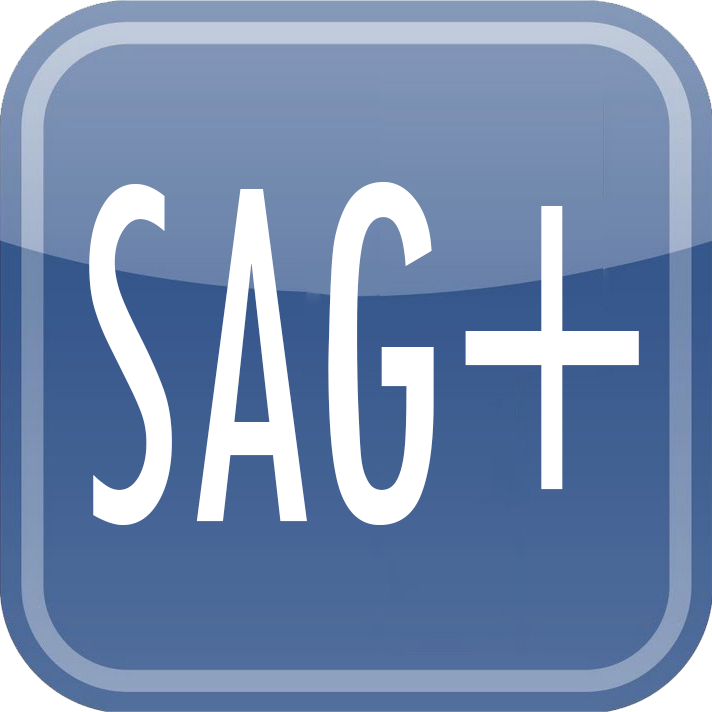
<style>
.page{position:relative;width:712px;height:712px}
.page>*{position:absolute;margin:0}
.t1{font:534.1px "TwCenMT-Condensed";color:#ffffff;scale:0.61 1}
</style>
<div class="page">
<p class="t1" style="left:89px;top:182px;width:550px;height:343px">SAG+</p>
</div>
